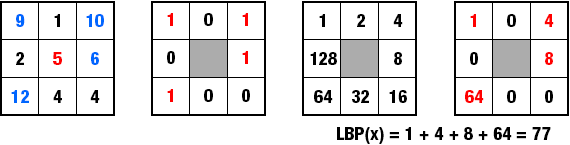
<style>
.page{position:relative;width:570px;height:145px;background:#ffffff}
.page>*{position:absolute;margin:0}
.t1{font:18px/38px "HelveticaNeueLTPro-HvCn";color:#000000}
.t2{font:18px/38px "HelveticaNeueLTPro-HvCn";color:#0066ff}
.t3{font:18px/38px "HelveticaNeueLTPro-HvCn";color:#fe0000}
.t4{font:18px/38px "HelveticaNeueLTPro-HvCn";color:#ff0000}
.t5{font:18px "HelveticaNeueLTPro-HvCn";color:#000000}
</style>
<div class="page">
<p class="t1" style="left:11px;top:14px;width:93px;height:89px"><span class="t2">9</span>      1     <span class="t2">10<br></span>  2      <span class="t3">5      </span><span class="t2">6<br> 12 </span>    4      4</p>
<p class="t1" style="left:167px;top:13px;width:83px;height:89px"><span class="t3">1</span>      0      <span class="t4">1<br></span>  0              <span class="t4">1<br>  1</span>      0      0</p>
<p class="t1" style="left:310px;top:14px;width:97px;height:89px">1      2      4<br>128            8<br> 64    32    16</p>
<p class="t1" style="left:465px;top:14px;width:89px;height:89px"><span class="t3">1</span>      0      <span class="t4">4<br></span>  0              <span class="t4">8<br> 64</span>     0      0</p>
<p class="t5" style="left:337px;top:127px;width:214px;height:17px">LBP(x) = 1 + 4 + 8 + 64 = 77</p>
</div>
